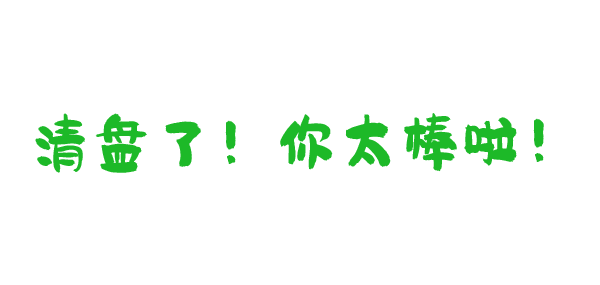
<style>
.page{position:relative;width:600px;height:285px;background:#ffffff}
.page>*{position:absolute;margin:0}
.t1{font:68.2px "HYShangWeiXiaoShiHouW";color:#1eb929;scale:0.9 1}
</style>
<div class="page">
<p class="t1" style="left:35px;top:113px;width:509px;height:60px">清盘了！你太棒啦！</p>
</div>
